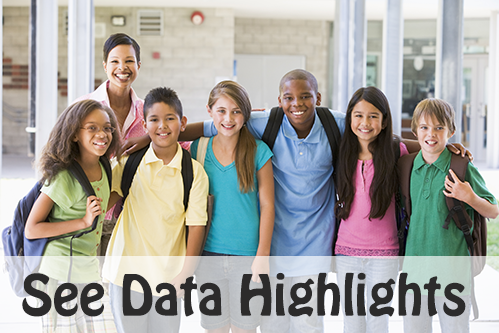
<style>
.page{position:relative;width:499px;height:333px}
.page>*{position:absolute;margin:0}
.t1{font:12px "HoboStd";color:#2c2b2b}
</style>
<div class="page">
<p class="t1" style="left:22px;top:272px;width:444px;height:45px;text-align:center">See Data Highlights</p>
</div>
